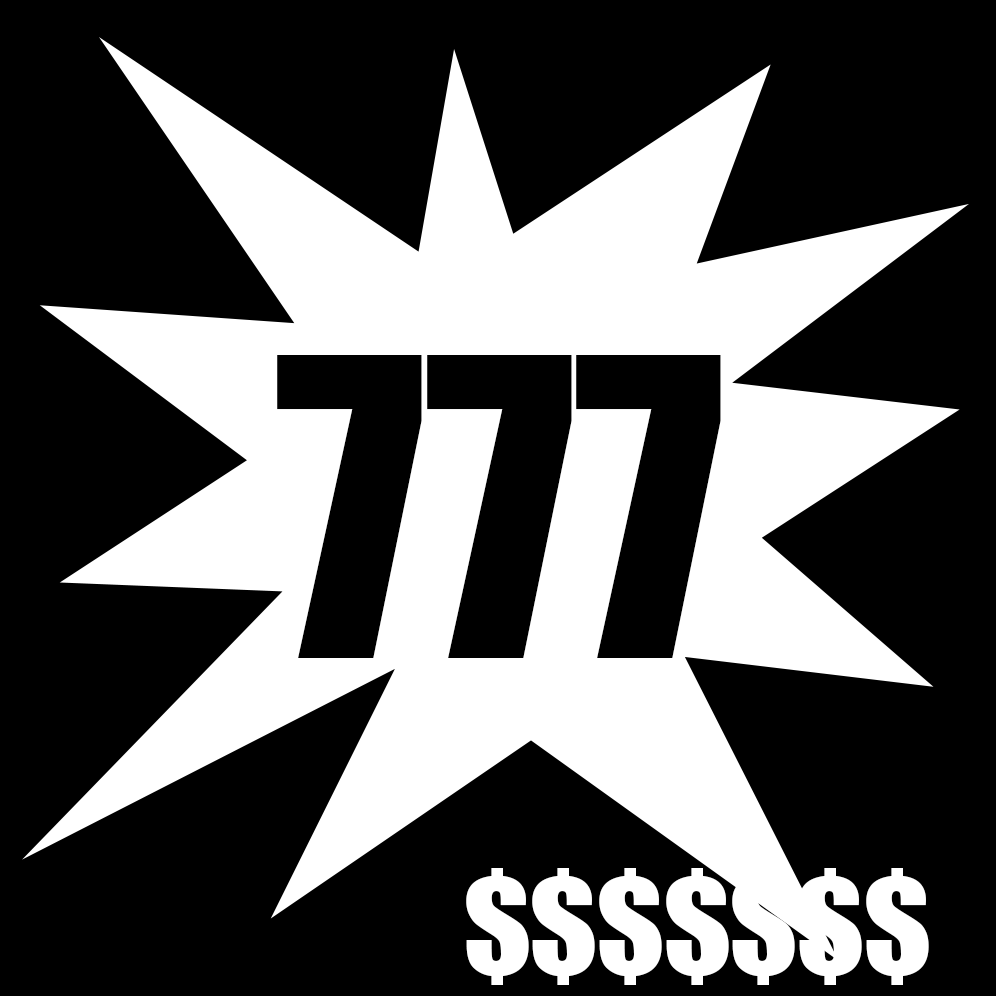
<style>
.page{position:relative;width:996px;height:996px;background:#000000}
.page>*{position:absolute;margin:0}
.t1{font:383px "Impact";letter-spacing:-0.02em;color:#000000}
.t2{font:126.4px "Impact";letter-spacing:-0.02em;color:#ffffff}
</style>
<div class="page">
<p class="t1" style="left:277px;top:355px;width:444px;height:303px">777</p>
<p class="t2" style="left:466px;top:868px;width:463px;height:117px">$$$$$$$</p>
</div>
